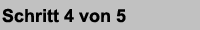
<style>
.page{position:relative;width:200px;height:30px;background:#c1c1c1}
.page>*{position:absolute;margin:0}
.t1{font:18px "Arial-BoldMT";color:#000000}
</style>
<div class="page">
<p class="t1" style="left:2px;top:8px;width:124px;height:15px">Schritt 4 von 5</p>
</div>
